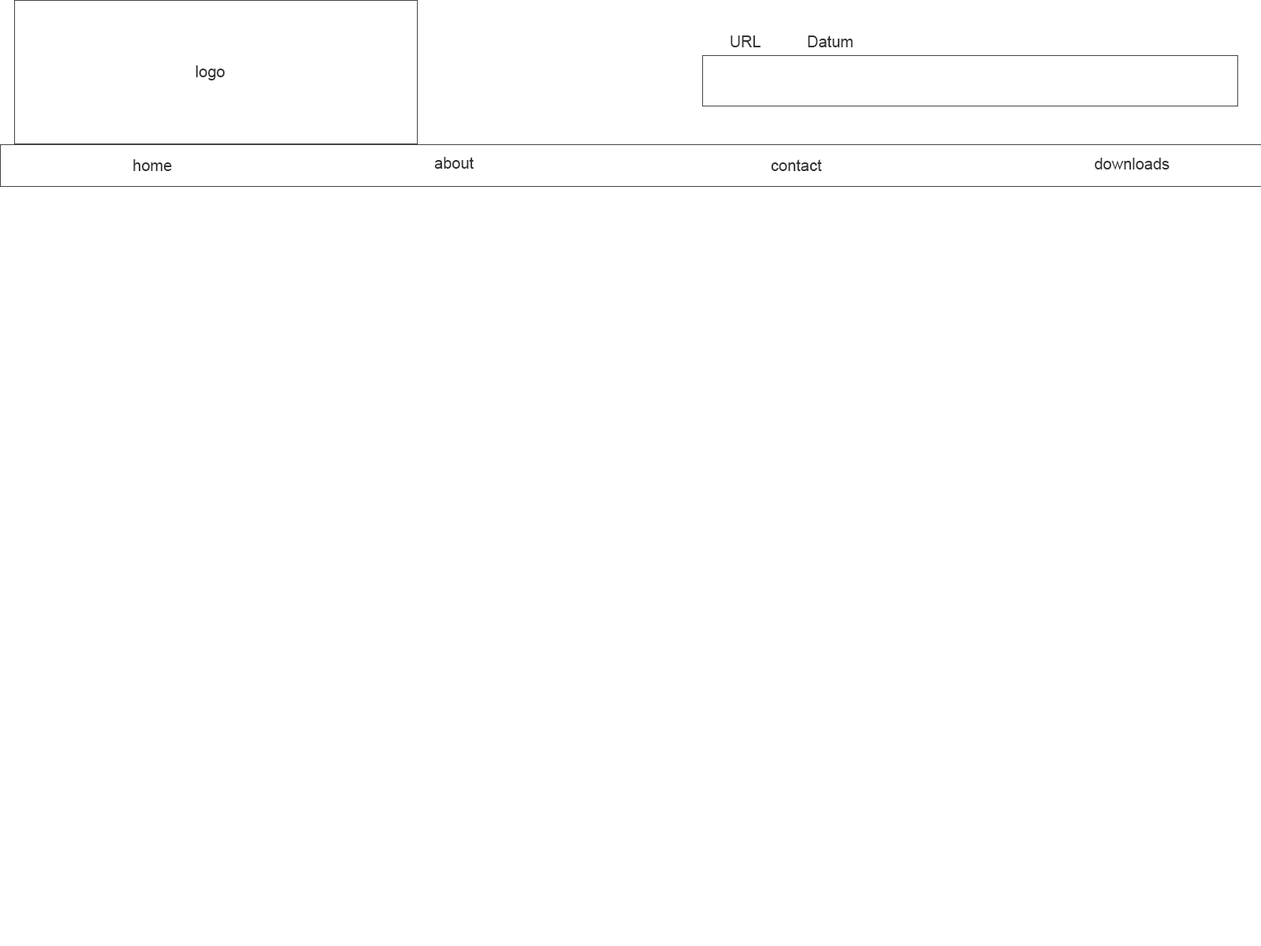
<style>
.page{position:relative;width:1261px;height:946px;background:#ffffff}
.page>*{position:absolute;margin:0}
.t1{font:15.8px "ArialMT";color:#343434}
</style>
<div class="page">
<p class="t1" style="left:731px;top:35px;width:29px;height:12px">URL</p>
<p class="t1" style="left:808px;top:35px;width:45px;height:12px">Datum</p>
<p class="t1" style="left:195px;top:65px;width:30px;height:15px">logo</p>
<p class="t1" style="left:133px;top:159px;width:39px;height:12px">home</p>
<p class="t1" style="left:434px;top:157px;width:40px;height:12px">about</p>
<p class="t1" style="left:771px;top:159px;width:51px;height:12px">contact</p>
<p class="t1" style="left:1095px;top:158px;width:74px;height:11px">downloads</p>
</div>
